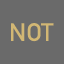
<style>
.page{position:relative;width:64px;height:64px;background:#6a6a6a}
.page>*{position:absolute;margin:0}
.t1{font:25px "DINAlternate-Bold";color:#d2b774}
</style>
<div class="page">
<p class="t1" style="left:11px;top:23px;width:43px;height:19px">NOT</p>
</div>
